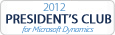
<style>
.page{position:relative;width:115px;height:35px;background:#ffffff}
.page>*{position:absolute;margin:0}
.t1{font:12px "MyriadPro-Regular";letter-spacing:-0.05em;color:#68a0cf}
.t2{font:13px "MyriadPro-Regular";color:#1a3055;font-weight:bold}
.t3{font:8px "SegoeUI-Italic";letter-spacing:-0.05em;font-style:italic}
</style>
<div class="page">
<p class="t1" style="left:43px;top:3px;width:23px;height:8px">2012</p>
<p class="t2" style="left:6px;top:14px;width:106px;height:10px">PRESIDENT’S CLUB</p>
<p class="t3" style="left:22px;top:26px;width:72px;height:8px">for Microsoft Dynamics</p>
</div>
